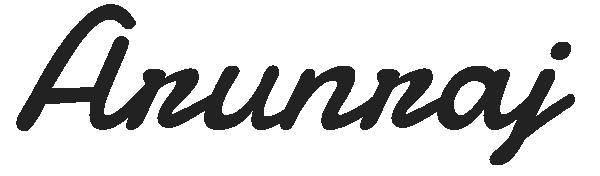
<style>
.page{position:relative;width:600px;height:176px;background:#ffffff}
.page>*{position:absolute;margin:0}
.t1{font:175.9px "Damion";color:#222222}
</style>
<div class="page">
<p class="t1" style="left:16px;top:4px;width:559px;height:161px">Arunraj</p>
</div>
